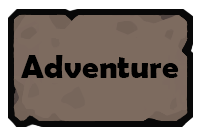
<style>
.page{position:relative;width:199px;height:133px;background:#7d6b5f}
.page>*{position:absolute;margin:0}
.t1{font:33.3px "BerlinSansFBDemi-Bold";color:#000000}
</style>
<div class="page">
<p class="t1" style="left:21px;top:55px;width:158px;height:23px">Adventure</p>
</div>
